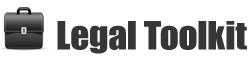
<style>
.page{position:relative;width:250px;height:58px;background:#ffffff}
.page>*{position:absolute;margin:0}
.t1{font:36px "Impact";color:#363636;scale:1.05 1}
</style>
<div class="page">
<p class="t1" style="left:57px;top:21px;width:190px;height:33px">Legal Toolkit</p>
</div>
